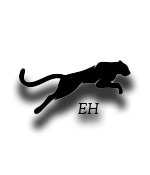
<style>
.page{position:relative;width:150px;height:175px;background:#ffffff}
.page>*{position:absolute;margin:0}
.t1{font:16.5px "GoudyOldStyleT-Italic";color:#000000}
</style>
<div class="page">
<p class="t1" style="left:78px;top:103px;width:21px;height:11px">EH</p>
</div>
